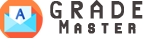
<style>
.page{position:relative;width:154px;height:38px;background:#ffffff}
.page>*{position:absolute;margin:0}
.t1{font:20px "NobelcatsCA";letter-spacing:0.35em;color:#433d3d;font-weight:bold}
.t2{font:15px "NobelcatsCA";letter-spacing:0.35em;color:#433d3d;font-weight:bold}
</style>
<div class="page">
<p class="t1" style="left:50px;top:0px;width:93px;height:19px">GRADE</p>
<p class="t2" style="left:59px;top:20px;width:77px;height:14px">Master</p>
</div>
